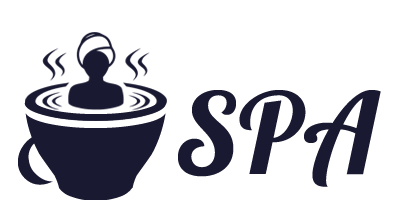
<style>
.page{position:relative;width:403px;height:221px;background:#ffffff}
.page>*{position:absolute;margin:0}
.t1{font:112px "Lobster1.4";color:#191932}
</style>
<div class="page">
<p class="t1" style="left:178px;top:90px;width:203px;height:97px">SPA</p>
</div>
